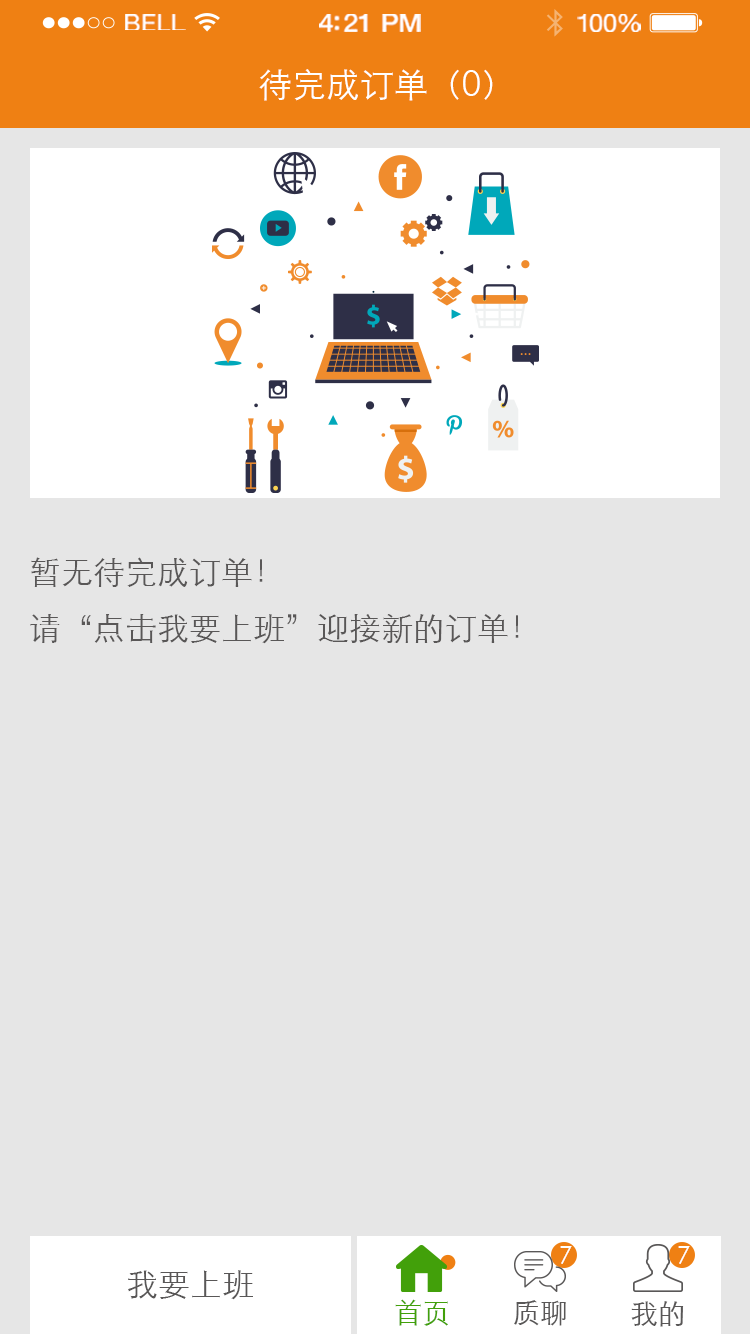
<style>
.page{position:relative;width:750px;height:1334px;background:#e6e6e6}
.page>*{position:absolute;margin:0}
.t1{font:23.3px "HelveticaNeue";letter-spacing:0.02em;color:#ffffff;scale:1.06 1}
.t2{font:25.3px "HelveticaNeue-Medium";letter-spacing:-0.02em;color:#ffffff;scale:1.06 1}
.t3{font:24.3px "HelveticaNeue";letter-spacing:-0.02em;color:#ffffff;scale:1.06 1}
.t4{font:34px "STXihei";color:#ffffff}
.t5{font:32px/56px "STXihei";color:#595757}
.t6{font:24px "STXihei";color:#ffffff}
.t7{font:32px "STXihei";color:#595757}
.t8{font:28px "STXihei";color:#42a00a}
.t9{font:28px "STXihei";color:#595757}
</style>
<div class="page">
<p class="t1" style="left:125px;top:14px;width:61px;height:16px">BELL</p>
<p class="t2" style="left:319px;top:14px;width:102px;height:18px">4:21 PM</p>
<p class="t3" style="left:577px;top:14px;width:64px;height:18px">100%</p>
<p class="t4" style="left:259px;top:69px;width:234px;height:32px">待完成订单（0）</p>
<p class="t5" style="left:30px;top:557px;width:489px;height:87px">暂无待完成订单！<br>请“点击我要上班”迎接新的订单！</p>
<p class="t6" style="left:560px;top:1246px;width:12px;height:18px">7</p>
<p class="t6" style="left:678px;top:1246px;width:12px;height:18px">7</p>
<p class="t7" style="left:128px;top:1270px;width:125px;height:30px">我要上班</p>
<p class="t8" style="left:395px;top:1299px;width:53px;height:27px">首页</p>
<p class="t9" style="left:514px;top:1300px;width:52px;height:26px">质聊</p>
<p class="t9" style="left:631px;top:1301px;width:53px;height:26px">我的</p>
</div>
